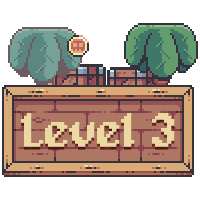
<style>
.page{position:relative;width:200px;height:200px;background:#ffffff}
.page>*{position:absolute;margin:0}
.t1{font:48px "Alagard";letter-spacing:-0.02em;color:#ebd9a1;font-weight:bold}
</style>
<div class="page">
<p class="t1" style="left:21px;top:113px;width:154px;height:34px">Level 3</p>
</div>
